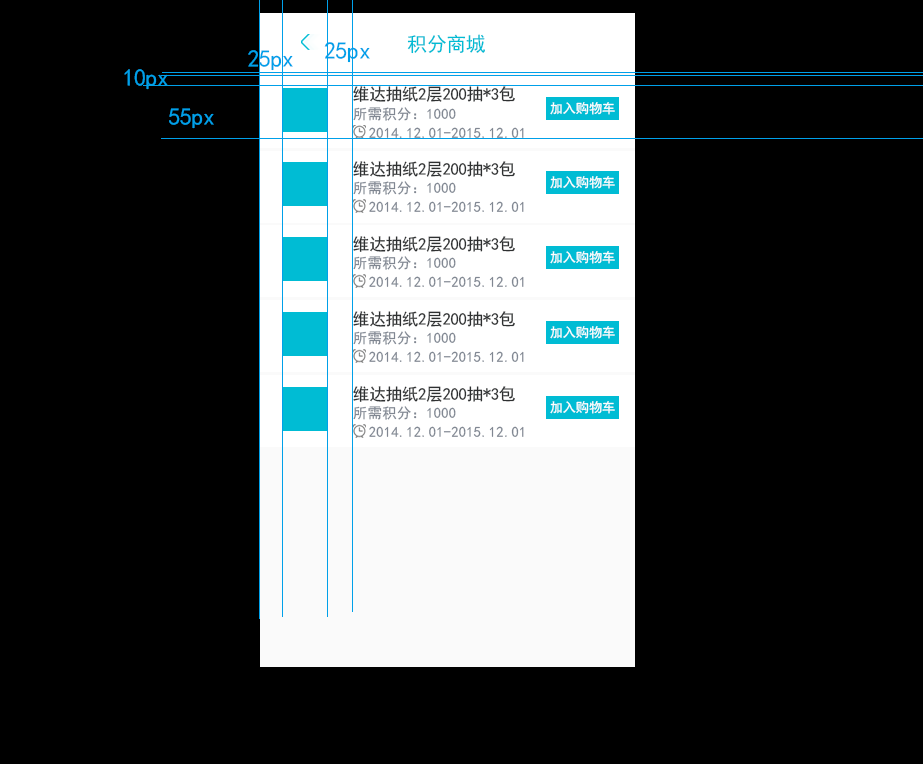
<style>
.page{position:relative;width:923px;height:764px;background:#000000}
.page>*{position:absolute;margin:0}
.t1{font:20px "SimHei";letter-spacing:-0.02em;color:#00bcd4}
.t2{font:24px "SimHei";letter-spacing:-0.02em;color:#00a0e9}
.t3{font:16.7px "SimHei";letter-spacing:-0.02em;color:#2e3031}
.t4{font:13.3px "SimHei";letter-spacing:-0.02em;color:#ffffff}
.t5{font:14.4px "SimHei";letter-spacing:0.02em;color:#808792}
</style>
<div class="page">
<p class="t1" style="left:407px;top:34px;width:78px;height:20px">积分商城</p>
<p class="t2" style="left:248px;top:50px;width:45px;height:21px">25px</p>
<p class="t2" style="left:324px;top:42px;width:46px;height:21px">25px</p>
<p class="t2" style="left:124px;top:69px;width:44px;height:21px">10px</p>
<p class="t3" style="left:353px;top:86px;width:162px;height:16px">维达抽纸2层200抽*3包</p>
<p class="t4" style="left:550px;top:102px;width:65px;height:13px">加入购物车</p>
<p class="t2" style="left:169px;top:108px;width:45px;height:21px">55px</p>
<p class="t5" style="left:353px;top:107px;width:103px;height:14px">所需积分：1000</p>
<p class="t5" style="left:369px;top:127px;width:155px;height:11px">2014.12.01-2015.12.01</p>
<p class="t3" style="left:353px;top:161px;width:162px;height:16px">维达抽纸2层200抽*3包</p>
<p class="t5" style="left:353px;top:181px;width:103px;height:14px">所需积分：1000</p>
<p class="t4" style="left:550px;top:176px;width:65px;height:13px">加入购物车</p>
<p class="t5" style="left:369px;top:201px;width:155px;height:11px">2014.12.01-2015.12.01</p>
<p class="t3" style="left:353px;top:236px;width:162px;height:16px">维达抽纸2层200抽*3包</p>
<p class="t5" style="left:353px;top:256px;width:103px;height:14px">所需积分：1000</p>
<p class="t4" style="left:550px;top:251px;width:65px;height:13px">加入购物车</p>
<p class="t5" style="left:369px;top:276px;width:155px;height:11px">2014.12.01-2015.12.01</p>
<p class="t3" style="left:353px;top:311px;width:162px;height:16px">维达抽纸2层200抽*3包</p>
<p class="t4" style="left:550px;top:326px;width:65px;height:13px">加入购物车</p>
<p class="t5" style="left:353px;top:331px;width:103px;height:14px">所需积分：1000</p>
<p class="t5" style="left:369px;top:351px;width:155px;height:11px">2014.12.01-2015.12.01</p>
<p class="t3" style="left:353px;top:386px;width:162px;height:16px">维达抽纸2层200抽*3包</p>
<p class="t4" style="left:550px;top:401px;width:65px;height:13px">加入购物车</p>
<p class="t5" style="left:353px;top:406px;width:103px;height:14px">所需积分：1000</p>
<p class="t5" style="left:369px;top:426px;width:155px;height:11px">2014.12.01-2015.12.01</p>
</div>
